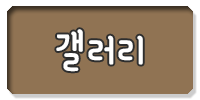
<style>
.page{position:relative;width:200px;height:100px;background:#907353}
.page>*{position:absolute;margin:0}
.t1{font:48.9px "YanoljaYacheR";color:#ffffff}
</style>
<div class="page">
<p class="t1" style="left:56px;top:29px;width:87px;height:43px">갤러리</p>
</div>
